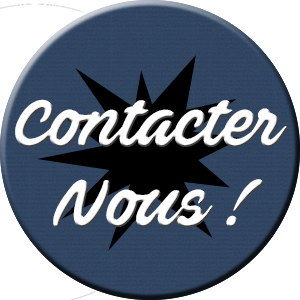
<style>
.page{position:relative;width:300px;height:300px;background:#ffffff}
.page>*{position:absolute;margin:0}
.t1{font:66.4px "AveFedanPERSONALUSEONLY";color:#ffffff}
</style>
<div class="page">
<p class="t1" style="left:15px;top:99px;width:272px;height:129px;text-align:center">Contacter<br>Nous !</p>
</div>
